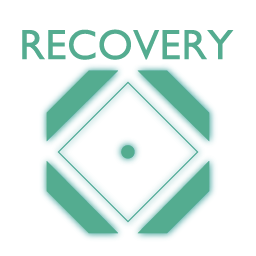
<style>
.page{position:relative;width:256px;height:256px;background:#ffffff}
.page>*{position:absolute;margin:0}
.t1{font:42.7px "GillSansMT";letter-spacing:0.01em;color:#54ac90}
</style>
<div class="page">
<p class="t1" style="left:22px;top:29px;width:212px;height:31px">RECOVERY</p>
</div>
